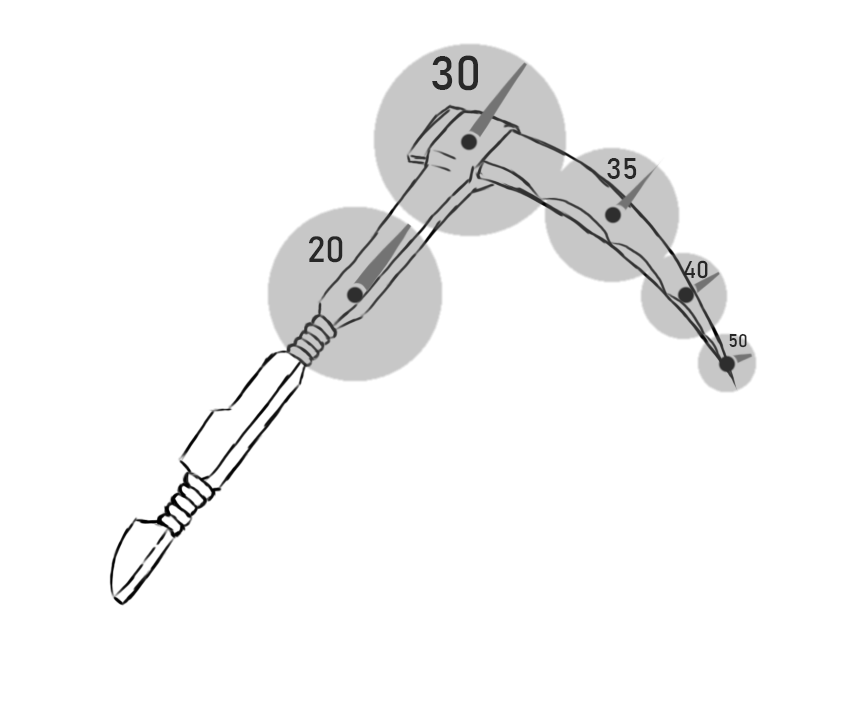
<style>
.page{position:relative;width:850px;height:709px;background:#ffffff}
.page>*{position:absolute;margin:0}
.t1{font:48px "Bahnschrift";color:#272727}
.t2{font:30px "Bahnschrift";color:#272727}
.t3{font:36px "Bahnschrift";color:#272727}
.t4{font:24px "Bahnschrift";color:#272727}
.t5{font:18px "Bahnschrift";color:#272727}
</style>
<div class="page">
<p class="t1" style="left:432px;top:55px;width:46px;height:36px">30</p>
<p class="t2" style="left:607px;top:158px;width:30px;height:21px">35</p>
<p class="t3" style="left:309px;top:236px;width:34px;height:27px">20</p>
<p class="t4" style="left:684px;top:260px;width:24px;height:19px">40</p>
<p class="t5" style="left:729px;top:333px;width:18px;height:15px">50</p>
</div>
